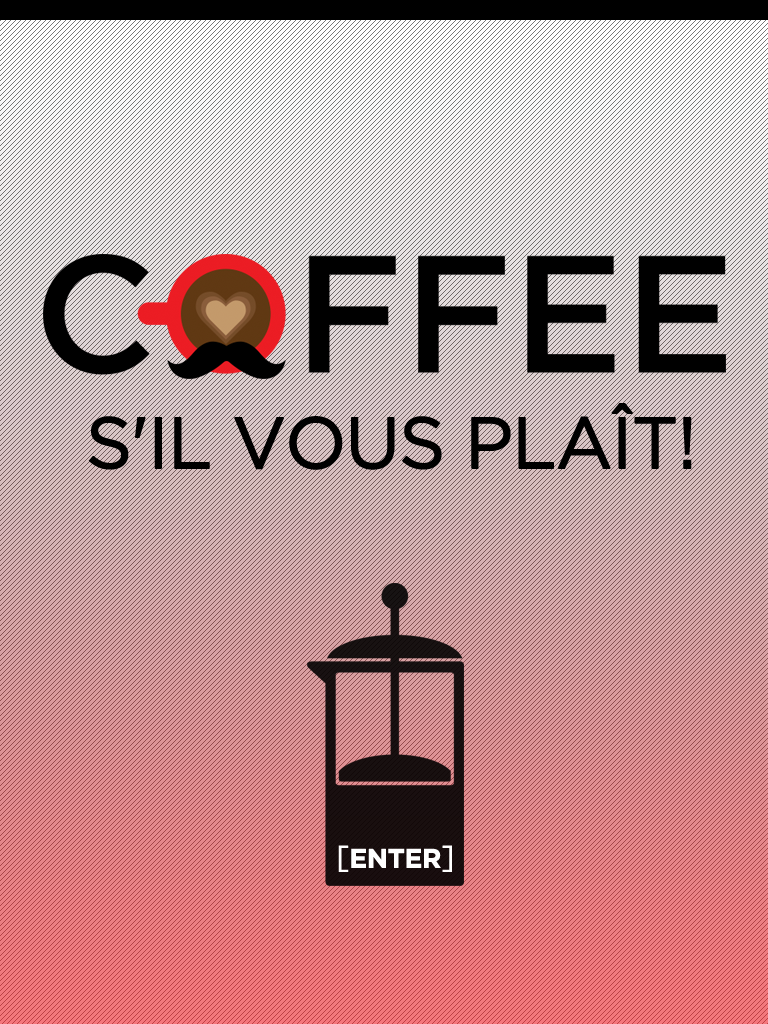
<style>
.page{position:relative;width:768px;height:1024px}
.page>*{position:absolute;margin:0}
.t1{font:72px "Gotham-Book";letter-spacing:-0.04em;color:#000000;text-transform:uppercase;font-weight:bold}
.t2{font:26.7px "Gotham-Bold";letter-spacing:-0.04em;color:#ffffff;text-transform:uppercase;font-weight:bold}
.t3{font:31.2px "Gotham-Book";letter-spacing:-0.04em;color:#ffffff;text-transform:uppercase;font-weight:bold}
</style>
<div class="page">
<p class="t1" style="left:88px;top:403px;width:604px;height:67px">s'il vous plaît!</p>
<p class="t2" style="left:338px;top:845px;width:114px;height:27px"><span class="t3">[</span>ENTER<span class="t3">]</span></p>
</div>
